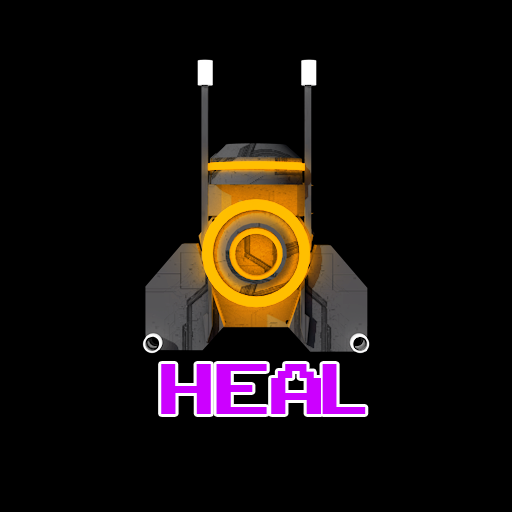
<style>
.page{position:relative;width:512px;height:512px;background:#000000}
.page>*{position:absolute;margin:0}
.t1{font:100px "ArcadeClassic";color:#cc00ff}
</style>
<div class="page">
<p class="t1" style="left:161px;top:364px;width:205px;height:50px">Heal</p>
</div>
